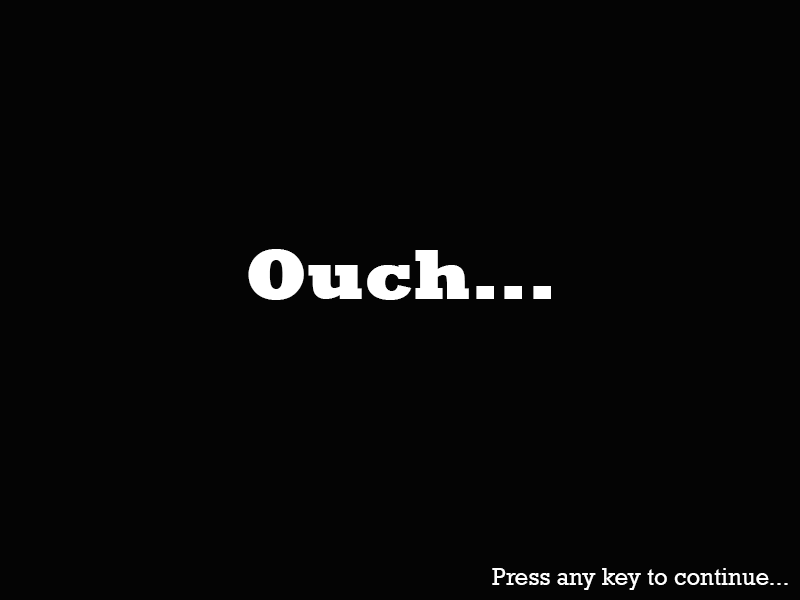
<style>
.page{position:relative;width:800px;height:600px;background:#040404}
.page>*{position:absolute;margin:0}
.t1{font:72px "Rockwell-ExtraBold";color:#ffffff}
.t2{font:24px "Rockwell";color:#ffffff}
</style>
<div class="page">
<p class="t1" style="left:248px;top:249px;width:303px;height:51px">Ouch...</p>
<p class="t2" style="left:492px;top:568px;width:296px;height:22px">Press any key to continue...</p>
</div>
